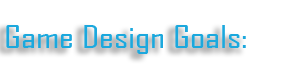
<style>
.page{position:relative;width:289px;height:74px;background:#ffffff}
.page>*{position:absolute;margin:0}
.t1{font:30.5px "AgencyFB-Reg";color:#1ca8dd;scale:1.3 1}
</style>
<div class="page">
<p class="t1" style="left:6px;top:25px;width:240px;height:29px">Game Design Goals:</p>
</div>
